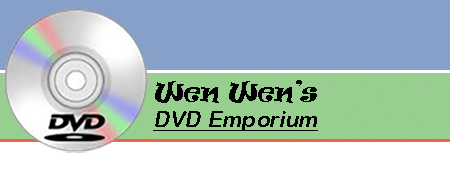
<style>
.page{position:relative;width:450px;height:174px;background:#86a0ca}
.page>*{position:absolute;margin:0}
.t1{font:22px "ArialRoundedMTBold";letter-spacing:0.01em;color:#000000;font-style:italic;text-decoration:underline}
.t2{font:26.4px "Ravie";color:#000000;font-style:italic;scale:0.88 1}
</style>
<div class="page">
<p class="t1" style="left:153px;top:80px;width:165px;height:51px"><span class="t2">Wen Wen’s<br></span>DVD Emporium</p>
</div>
